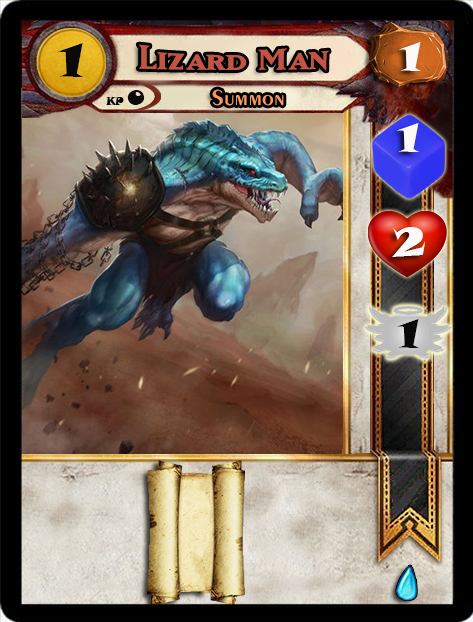
<style>
.page{position:relative;width:473px;height:622px}
.page>*{position:absolute;margin:0}
.t1{font:46.6px "SnapITC-Regular";color:#090909;scale:1.05 1}
.t2{font:40px "MatrixBoldSmallCaps";color:#c25443;scale:1.06 1}
.t3{font:40px "SnapITC-Regular";color:#fef9f9;scale:1.05 1}
.t4{font:22.7px "Exotic350BT-DemiBold";color:#f89c64;scale:1.06 1}
.t5{font:20.5px "SnapITC-Regular";color:#090909}
.t6{font:40px "SnapITC-Regular";color:#090909;scale:1.05 1}
</style>
<div class="page">
<p class="t1" style="left:58px;top:43px;width:25px;height:34px">1</p>
<p class="t2" style="left:138px;top:44px;width:191px;height:27px">Lizard Man</p>
<p class="t3" style="left:399px;top:42px;width:22px;height:29px">1</p>
<p class="t4" style="left:212px;top:89px;width:72px;height:17px">Summon</p>
<p class="t5" style="left:127px;top:90px;width:18px;height:15px">0</p>
<p class="t3" style="left:397px;top:123px;width:22px;height:29px">1</p>
<p class="t3" style="left:392px;top:227px;width:34px;height:30px">2</p>
<p class="t6" style="left:397px;top:319px;width:22px;height:29px">1</p>
</div>
